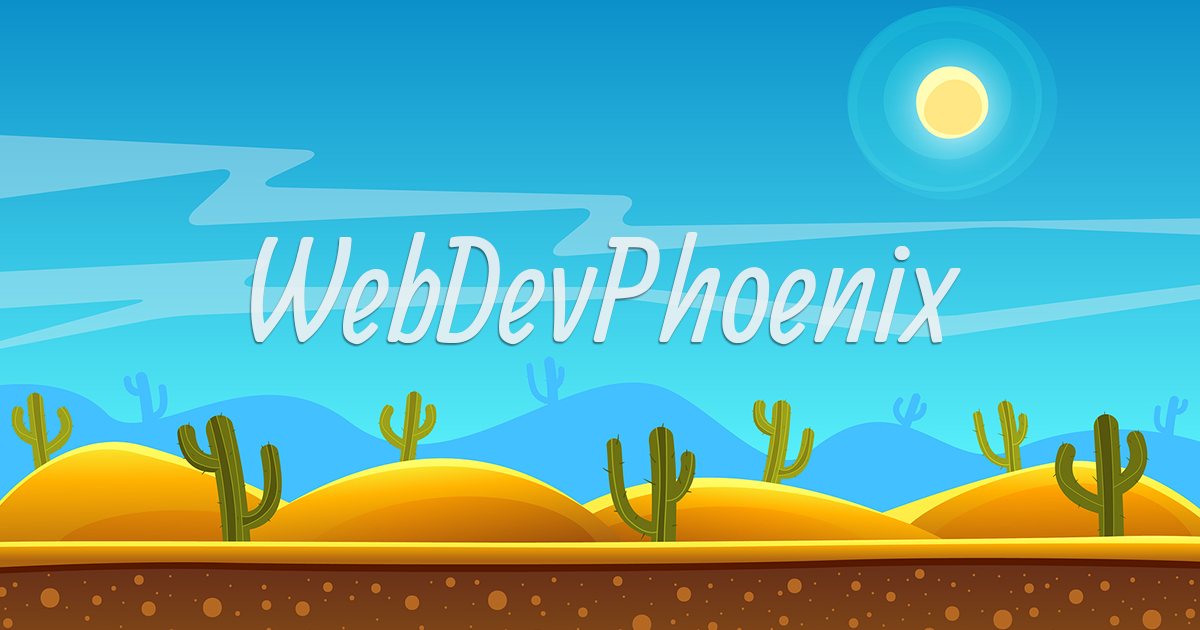
<style>
.page{position:relative;width:1200px;height:630px}
.page>*{position:absolute;margin:0}
.t1{font:145.1px "Allan-Regular";color:#dbeef2}
</style>
<div class="page">
<p class="t1" style="left:251px;top:232px;width:710px;height:113px">WebDevPhoenix</p>
</div>
